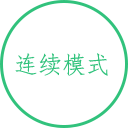
<style>
.page{position:relative;width:128px;height:128px;background:#ffffff}
.page>*{position:absolute;margin:0}
.t1{font:24px "FangSong";color:#31c27c}
</style>
<div class="page">
<p class="t1" style="left:15px;top:53px;width:93px;height:23px">连续模式</p>
</div>
